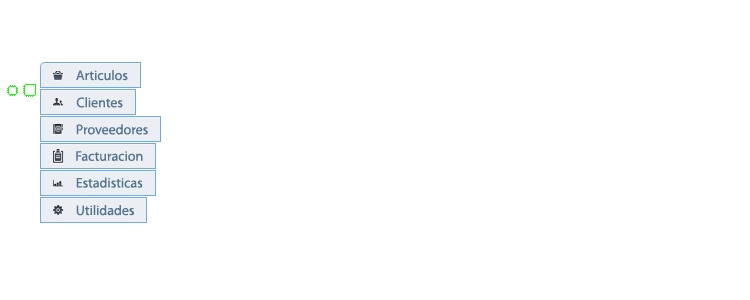
<style>
.page{position:relative;width:750px;height:300px;background:#ffffff}
.page>*{position:absolute;margin:0}
.t1{font:14px "MyriadPro-Regular";color:#557590}
</style>
<div class="page">
<p class="t1" style="left:76px;top:70px;width:52px;height:11px">Articulos</p>
<p class="t1" style="left:76px;top:97px;width:47px;height:11px">Clientes</p>
<p class="t1" style="left:76px;top:124px;width:72px;height:11px">Proveedores</p>
<p class="t1" style="left:76px;top:151px;width:67px;height:10px">Facturacion</p>
<p class="t1" style="left:76px;top:177px;width:67px;height:11px">Estadisticas</p>
<p class="t1" style="left:76px;top:205px;width:58px;height:11px">Utilidades</p>
</div>
